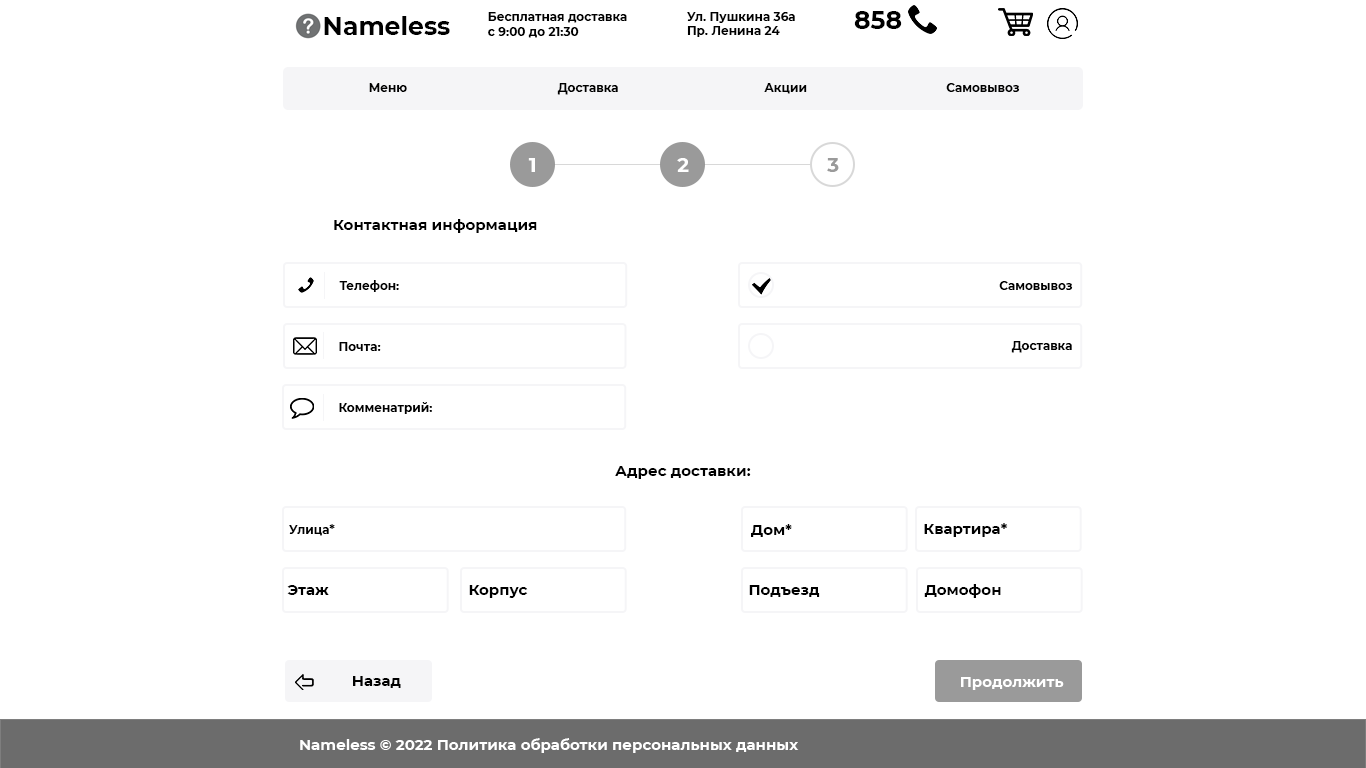
<style>
.page{position:relative;width:1366px;height:768px;background:#ffffff}
.page>*{position:absolute;margin:0}
.t1{font:25px "Montserrat-Bold";color:#000000}
.t2{font:12px "Montserrat-Bold";color:#000000}
.t3{font:20px "Montserrat-Bold";color:#ffffff}
.t4{font:20px "Montserrat-Bold";color:#9a9a9a}
.t5{font:15px "Montserrat-Bold";color:#000000}
.t6{font:15px "Montserrat-Bold";color:#ffffff}
</style>
<div class="page">
<p class="t1" style="left:324px;top:16px;width:126px;height:19px">Nameless</p>
<p class="t2" style="left:488px;top:12px;width:139px;height:26px">Бесплатная доставка<br>с 9:00 до 21:30</p>
<p class="t2" style="left:687px;top:12px;width:108px;height:25px">Ул. Пушкина 36а<br>Пр. Ленина 24</p>
<p class="t1" style="left:854px;top:11px;width:48px;height:18px">858</p>
<p class="t2" style="left:369px;top:83px;width:38px;height:9px">Меню</p>
<p class="t2" style="left:557px;top:83px;width:61px;height:12px">Доставка</p>
<p class="t2" style="left:764px;top:83px;width:43px;height:11px">Акции</p>
<p class="t2" style="left:946px;top:83px;width:74px;height:9px">Самовывоз</p>
<p class="t3" style="left:528px;top:158px;width:7px;height:14px">1</p>
<p class="t3" style="left:677px;top:158px;width:12px;height:14px">2</p>
<p class="t4" style="left:827px;top:158px;width:12px;height:14px">3</p>
<p class="t5" style="left:334px;top:219px;width:203px;height:14px">Контактная информация</p>
<p class="t2" style="left:339px;top:280px;width:60px;height:12px">Телефон:</p>
<p class="t2" style="left:999px;top:281px;width:74px;height:9px">Самовывоз</p>
<p class="t2" style="left:339px;top:342px;width:42px;height:9px">Почта:</p>
<p class="t2" style="left:1011px;top:341px;width:61px;height:12px">Доставка</p>
<p class="t2" style="left:339px;top:402px;width:93px;height:12px">Комменатрий:</p>
<p class="t5" style="left:615px;top:466px;width:136px;height:13px">Адрес доставки:</p>
<p class="t2" style="left:289px;top:524px;width:46px;height:12px">Улица*</p>
<p class="t5" style="left:751px;top:524px;width:41px;height:13px">Дом*</p>
<p class="t5" style="left:924px;top:523px;width:84px;height:14px">Квартира*</p>
<p class="t5" style="left:287px;top:585px;width:42px;height:10px">Этаж</p>
<p class="t5" style="left:469px;top:585px;width:59px;height:13px">Корпус</p>
<p class="t5" style="left:749px;top:585px;width:71px;height:12px">Подъезд</p>
<p class="t5" style="left:924px;top:584px;width:77px;height:14px">Домофон</p>
<p class="t5" style="left:353px;top:676px;width:48px;height:12px">Назад</p>
<p class="t6" style="left:961px;top:677px;width:103px;height:13px">Продолжить</p>
<p class="t6" style="left:300px;top:738px;width:499px;height:15px">Nameless © 2022 Политика обработки персональных данных</p>
</div>
